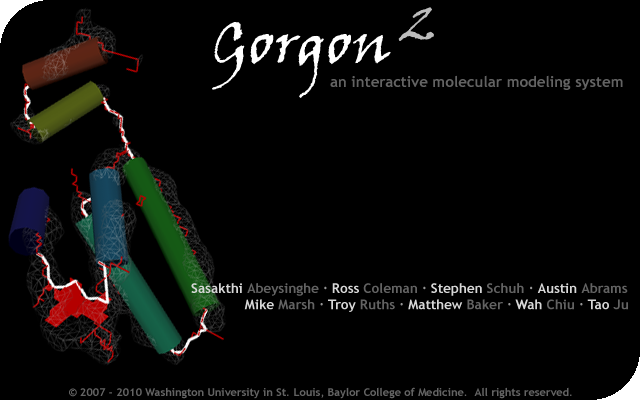
<style>
.page{position:relative;width:640px;height:400px;background:#000000}
.page>*{position:absolute;margin:0}
.t1{font:48px "VinerHandITC";color:#bcbcbc}
.t2{font:60px "VinerHandITC";color:#ffffff}
.t3{font:15px "TrebuchetMS-Bold";color:#636363}
.t4{font:13.5px "TrebuchetMS-Bold";color:#636363}
.t5{font:13.5px "TrebuchetMS-Bold";color:#d7d7d7}
.t6{font:13.5px "TrebuchetMS-Bold";color:#959595}
.t7{font:11px "TrebuchetMS-Bold";color:#636363}
</style>
<div class="page">
<p class="t1" style="left:398px;top:7px;width:36px;height:34px">2</p>
<p class="t2" style="left:212px;top:22px;width:179px;height:76px">Gorgon</p>
<p class="t3" style="left:330px;top:75px;width:293px;height:15px">an interactive molecular modeling system</p>
<p class="t4" style="left:191px;top:283px;width:437px;height:29px;text-align:right"><span class="t5">Sasakthi </span>Abeysinghe <span class="t6">· </span><span class="t5">Ross </span>Coleman <span class="t6">· </span><span class="t5">Stephen </span>Schuh <span class="t6">· </span><span class="t5">Austin </span>Abrams <br><span class="t5">Mike </span>Marsh<span class="t6"> · </span><span class="t5">Troy </span>Ruths <span class="t6">· </span><span class="t5">Matthew </span>Baker <span class="t6">· </span><span class="t5">Wah </span>Chiu <span class="t6">· </span><span class="t5">Tao </span>Ju</p>
<p class="t7" style="left:69px;top:387px;width:503px;height:12px">© 2007 - 2010 Washington University in St. Louis, Baylor College of Medicine.  All rights reserved.</p>
</div>
